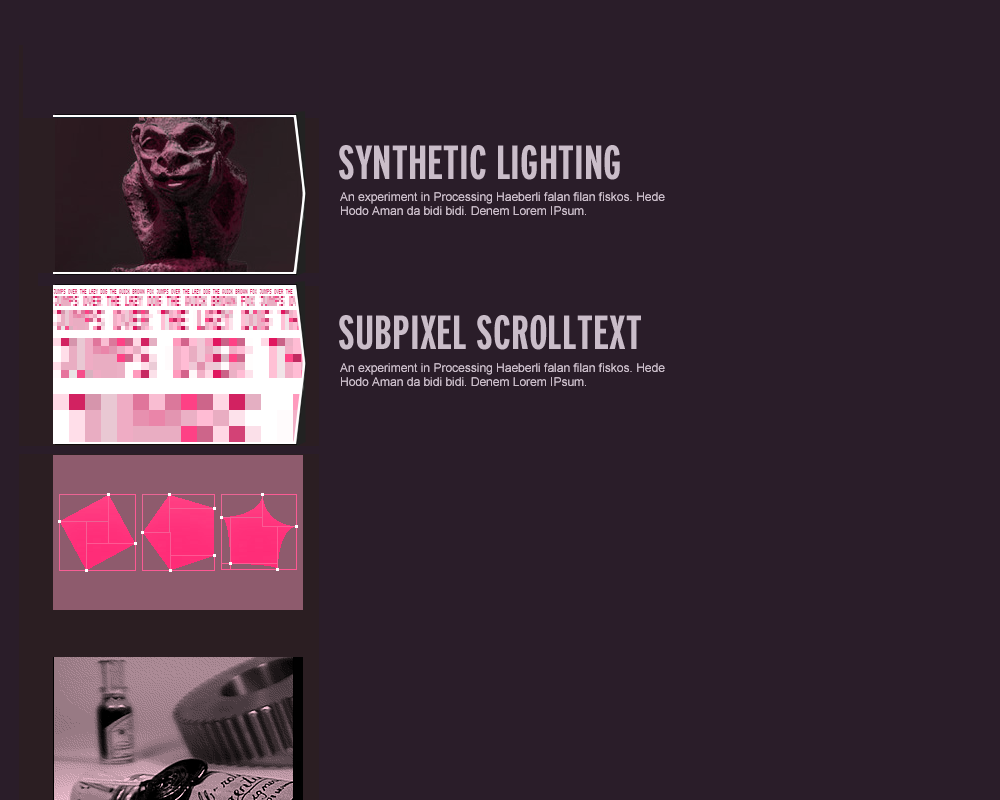
<style>
.page{position:relative;width:1000px;height:800px;background:#2a1d29}
.page>*{position:absolute;margin:0}
.t1{font:48px "InterstateTBoldCompressed";color:#c2c2c2}
.t2{font:12px "ArialMT";color:#c2c2c2}
</style>
<div class="page">
<p class="t1" style="left:339px;top:145px;width:281px;height:35px">SYNTHETIC LIGHTING</p>
<p class="t2" style="left:340px;top:192px;width:325px;height:23px">An experiment in Processing Haeberli falan filan fiskos. Hede<br>Hodo Aman da bidi bidi. Denem Lorem IPsum.</p>
<p class="t1" style="left:339px;top:315px;width:302px;height:35px">SUBPIXEL SCROLLTEXT</p>
<p class="t2" style="left:340px;top:363px;width:325px;height:23px">An experiment in Processing Haeberli falan filan fiskos. Hede<br>Hodo Aman da bidi bidi. Denem Lorem IPsum.</p>
</div>
